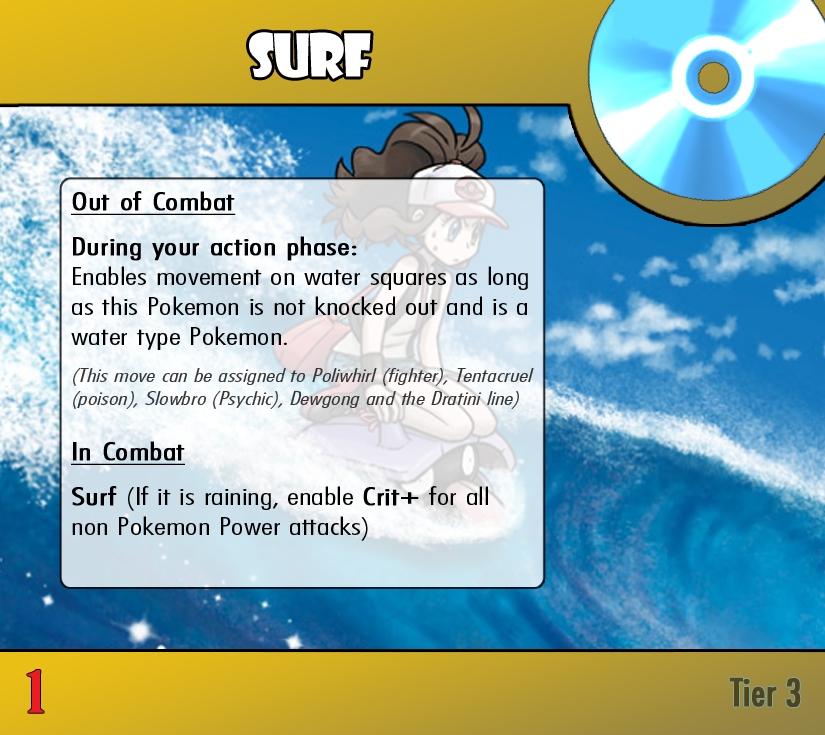
<style>
.page{position:relative;width:825px;height:735px}
.page>*{position:absolute;margin:0}
.t1{font:57.4px "ShowcardGothic-Reg";letter-spacing:-0.025em;color:#ffffff;scale:0.91 1}
.t2{font:18.7px "FuturaCondensedBQ-Light";color:#353535;font-style:italic;scale:1.5 1}
.t3{font:25px "FuturaCondensedBQ-Light";color:#000000;font-weight:bold;text-decoration:underline;scale:1.5 1}
.t4{font:25px "FuturaCondensedBQ-Light";color:#000000;font-weight:bold;scale:1.5 1}
.t5{font:25px "FuturaCondensedBQ-Light";color:#000000;scale:1.5 1}
.t6{font:55.6px "BirchStd";color:#ed1c24;font-weight:bold;scale:1.5 1}
.t7{font:37.5px "Futura-Condensed-Normal";color:#4e451f;font-weight:bold}
</style>
<div class="page">
<p class="t1" style="left:249px;top:32px;width:122px;height:47px">Surf</p>
<p class="t2" style="left:71px;top:191px;width:463px;height:350px"><span class="t3">Out of Combat<br><br></span><span class="t4">During your action phase: </span><span class="t5"><br>Enables movement on water squares as long as this Pokemon is not knocked out and is a water type Pokemon.<br><br></span>(This move can be assigned to Poliwhirl (fighter), Tentacruel (poison), Slowbro (Psychic), Dewgong and the Dratini line)<br><br><span class="t3">In Combat<br><br></span><span class="t4">Surf </span><span class="t5">(If it is raining, enable </span><span class="t4">Crit+ </span><span class="t5">for all non Pokemon Power attacks)</span></p>
<p class="t6" style="left:27px;top:670px;width:17px;height:43px">1</p>
<p class="t7" style="left:729px;top:677px;width:72px;height:30px">Tier 3</p>
</div>
